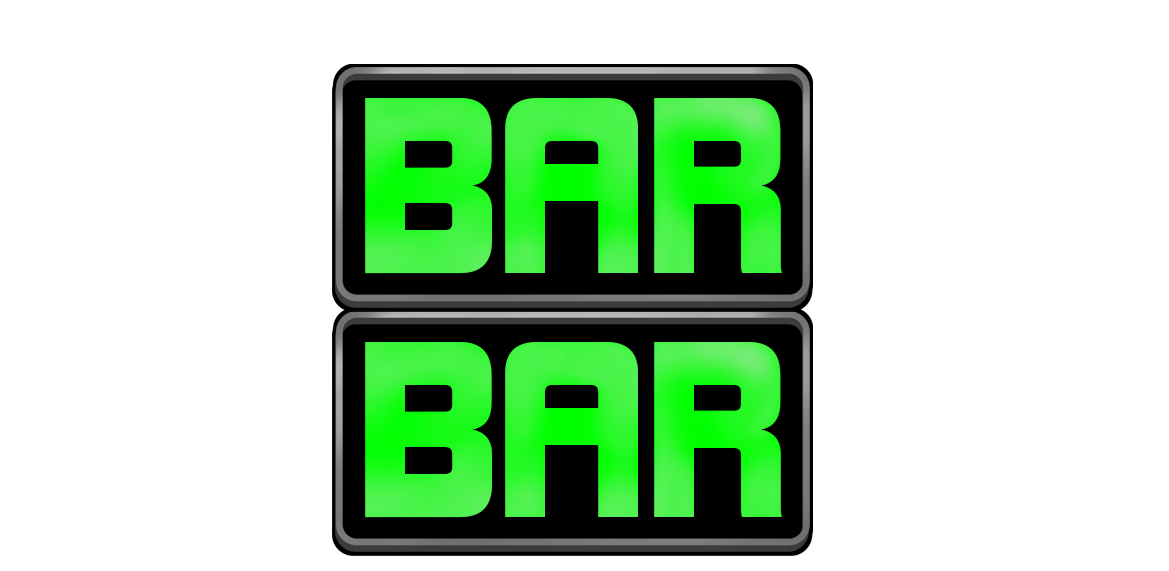
<style>
.page{position:relative;width:1169px;height:571px;background:#ffffff}
.page>*{position:absolute;margin:0}
.t1{font:230.9px "KimberleyBl-Regular";letter-spacing:-0.02em}
</style>
<div class="page">
<p class="t1" style="left:365px;top:98px;width:417px;height:176px">BAR</p>
<p class="t1" style="left:365px;top:342px;width:417px;height:176px">BAR</p>
</div>
